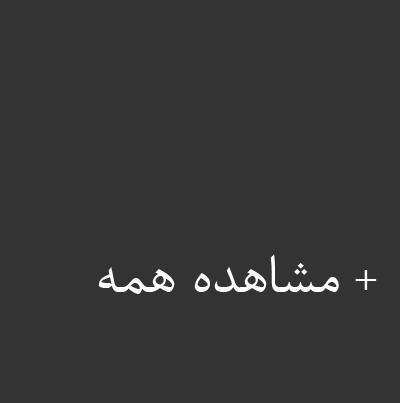
<style>
.page{position:relative;width:400px;height:403px;background:#333333}
.page>*{position:absolute;margin:0}
.t1{font:64px "BNazanin";color:#ffffff}
</style>
<div class="page">
<p class="t1" style="left:98px;top:254px;width:279px;height:40px">مشاهده همه +</p>
</div>
